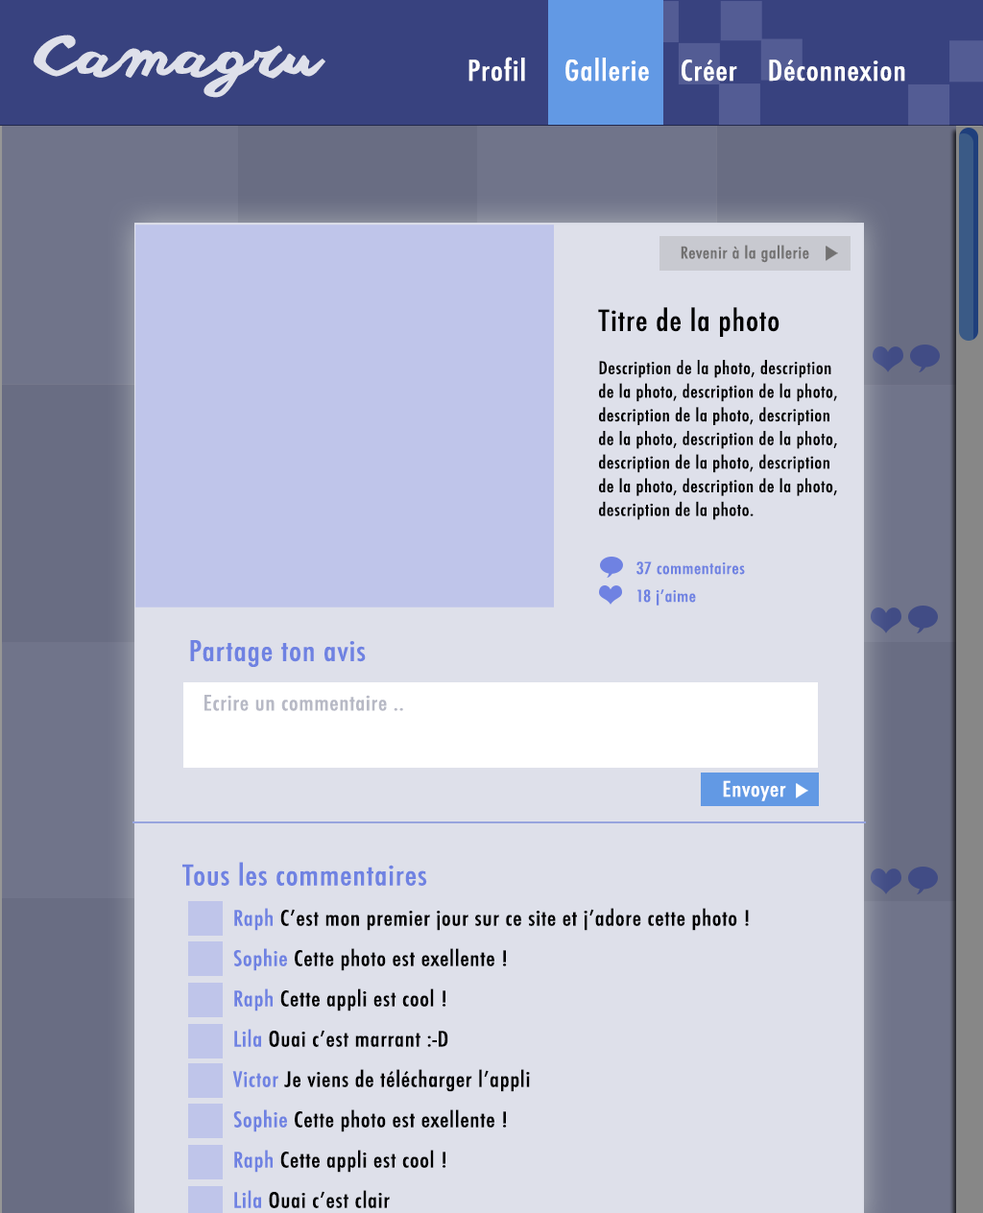
<style>
.page{position:relative;width:983px;height:1213px;background:#dee0ea}
.page>*{position:absolute;margin:0}
.t1{font:55.3px "anothershabby";color:#dee0ea;scale:1.17 1}
.t2{font:27.6px "Futura-CondensedMedium";letter-spacing:0.025em;color:#ffffff;scale:1.17 1}
.t3{font:16.1px "Futura-CondensedMedium";letter-spacing:0.025em;color:#727171;scale:1.17 1}
.t4{font:17px/23.6px "Futura-CondensedMedium";letter-spacing:0.025em;color:#000000;scale:1.15 1}
.t5{font:28.4px/31.5px "Futura-CondensedMedium";letter-spacing:0.025em;color:#000000;scale:1.15 1}
.t6{font:17px/43.2px "Futura-CondensedMedium";letter-spacing:0.025em;color:#000000;scale:1.15 1}
.t7{font:16.1px/27.8px "Futura-CondensedMedium";letter-spacing:0.025em;color:#6f82e2;scale:1.17 1}
.t8{font:27.6px "Futura-CondensedMedium";letter-spacing:0.025em;color:#6f82e2;scale:1.17 1}
.t9{font:20.7px "Futura-CondensedMedium";letter-spacing:0.025em;color:#b7b9c5;scale:1.17 1}
.t10{font:20.7px "Futura-CondensedMedium";letter-spacing:0.025em;color:#ffffff;scale:1.17 1}
.t11{font:20.7px/40.3px "Futura-CondensedMedium";letter-spacing:0.025em;color:#000000;scale:1.17 1}
.t12{font:27.6px/28.8px "Futura-CondensedMedium";letter-spacing:0.025em;color:#6f82e2;scale:1.17 1}
.t13{font:20.7px/40.3px "Futura-CondensedMedium";letter-spacing:0.025em;color:#6f82e2;scale:1.17 1}
</style>
<div class="page">
<p class="t1" style="left:34px;top:35px;width:291px;height:63px">Camagru</p>
<p class="t2" style="left:468px;top:57px;width:437px;height:25px">Profil     Gallerie    Créer    Déconnexion</p>
<p class="t3" style="left:681px;top:245px;width:128px;height:18px">Revenir à la gallerie</p>
<p class="t4" style="left:598px;top:307px;width:239px;height:213px"><span class="t5">Titre de la photo<br></span><span class="t6">Description de la photo, descri</span>ption de la photo, description de la photo, description de la photo, description de la photo, description de la photo, description de la photo, description de la photo, description de la photo, description de la photo.</p>
<p class="t7" style="left:636px;top:561px;width:109px;height:45px">37 commentaires<br>18 j’aime</p>
<p class="t8" style="left:190px;top:640px;width:176px;height:27px">Partage ton avis</p>
<p class="t9" style="left:204px;top:695px;width:199px;height:16px">Ecrire un commentaire ..</p>
<p class="t10" style="left:723px;top:780px;width:63px;height:21px">Envoyer</p>
<p class="t11" style="left:182px;top:862px;width:567px;height:346px"><span class="t12">Tous les commentaires <br></span><span class="t13">         Raph </span>C’est mon premier jour sur ce site et j’adore cette photo !<br><span class="t13">         Sophie </span>Cette photo est exellente ! <br><span class="t13">         Raph </span>Cette appli est cool !<br><span class="t13">         Lila </span>Ouai c’est marrant :-D<br><span class="t13">         Victor </span>Je viens de télécharger l’appli<br><span class="t13">         Sophie </span>Cette photo est exellente ! <br><span class="t13">         Raph </span>Cette appli est cool !<br><span class="t13">         Lila </span>Ouai c’est clair</p>
</div>
